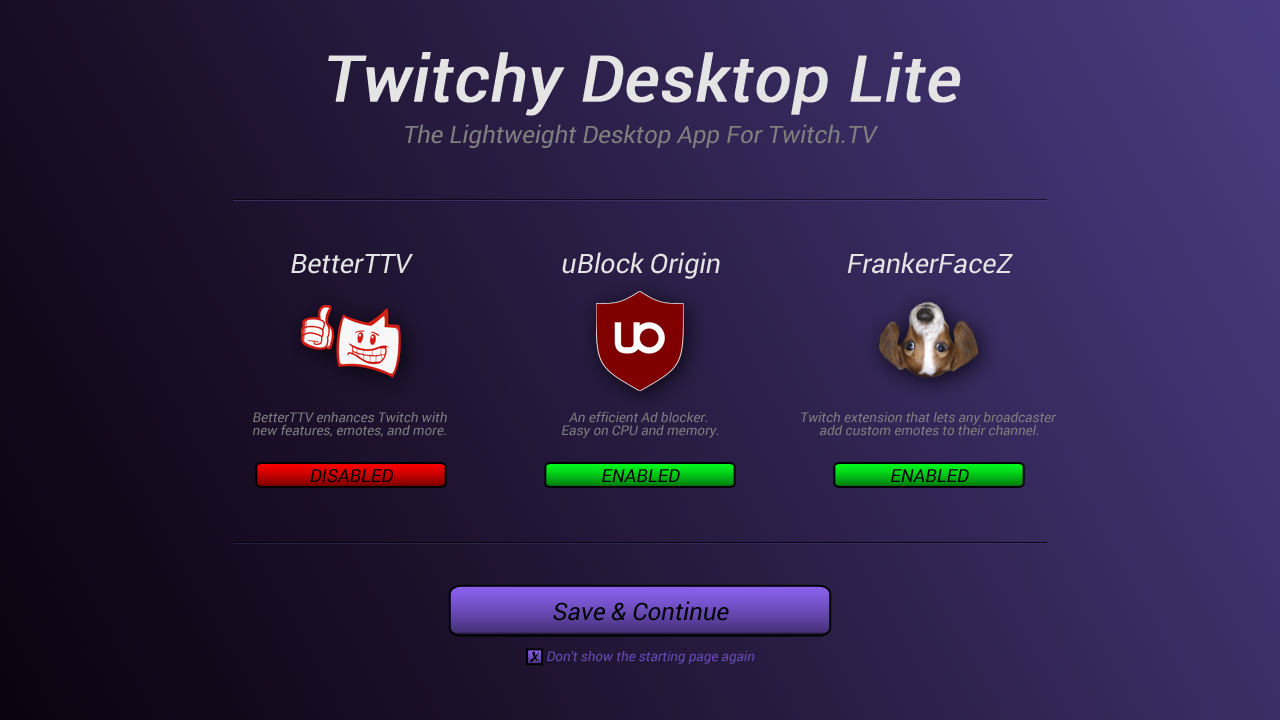
<style>
.page{position:relative;width:1280px;height:720px}
.page>*{position:absolute;margin:0}
.t1{font:64px "Roboto-Regular";color:#e4e4e4;font-weight:bold;font-style:italic}
.t2{font:24px "Roboto-Regular";color:#7f7f7f;font-style:italic}
.t3{font:26.7px "Roboto-Regular";color:#e4e4e4;font-style:italic}
.t4{font:13.3px/13.3px "Roboto-Regular";color:#7f7f7f;font-style:italic}
.t5{font:18px "Roboto-Regular";color:#000000;font-style:italic}
.t6{font:24px "Roboto-Regular";color:#000000;font-style:italic}
.t7{font:13.3px "JingJing";color:#000000;font-style:italic}
.t8{font:13.3px "Roboto-Regular";color:#6b4bb9;font-style:italic}
</style>
<div class="page">
<p class="t1" style="left:328px;top:52px;width:633px;height:64px">Twitchy Desktop Lite</p>
<p class="t2" style="left:405px;top:124px;width:474px;height:24px">The Lightweight Desktop App For Twitch.TV</p>
<p class="t3" style="left:291px;top:254px;width:122px;height:20px">BetterTTV</p>
<p class="t3" style="left:562px;top:252px;width:158px;height:27px">uBlock Origin</p>
<p class="t3" style="left:847px;top:252px;width:166px;height:22px">FrankerFaceZ</p>
<p class="t4" style="left:253px;top:412px;width:194px;height:25px;text-align:center">BetterTTV enhances Twitch with <br>new features, emotes, and more.</p>
<p class="t4" style="left:562px;top:411px;width:157px;height:27px;text-align:center">An efficient Ad blocker. <br>Easy on CPU and memory.</p>
<p class="t4" style="left:801px;top:412px;width:256px;height:24px;text-align:center">Twitch extension that lets any broadcaster <br>add custom emotes to their channel.</p>
<p class="t5" style="left:310px;top:469px;width:83px;height:14px">DISABLED</p>
<p class="t5" style="left:602px;top:469px;width:78px;height:13px">ENABLED</p>
<p class="t5" style="left:891px;top:469px;width:78px;height:13px">ENABLED</p>
<p class="t6" style="left:553px;top:601px;width:176px;height:20px">Save &amp; Continue</p>
<p class="t7" style="left:530px;top:651px;width:9px;height:12px">x</p>
<p class="t8" style="left:547px;top:651px;width:208px;height:13px">Don't show the starting page again</p>
</div>
